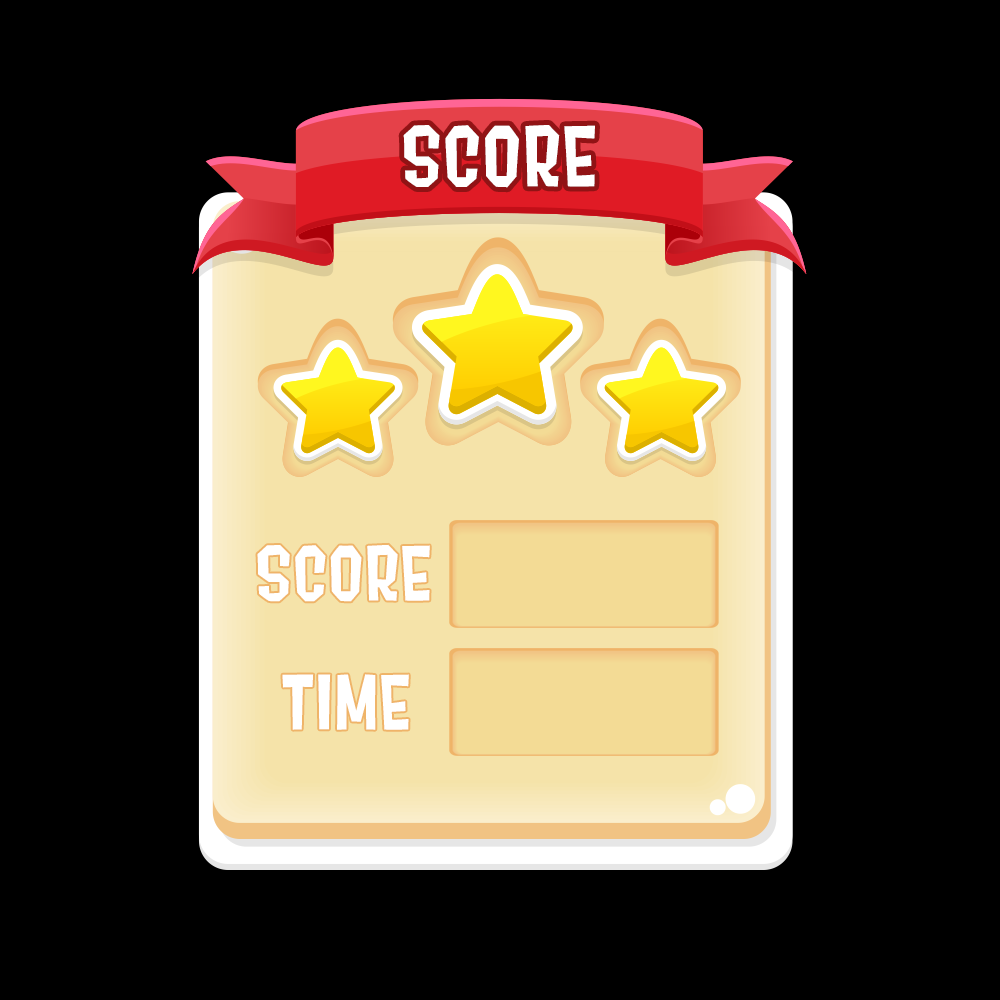
<style>
.page{position:relative;width:1000px;height:1000px;background:#000000}
.page>*{position:absolute;margin:0}
.t1{font:83.3px "Splat2K";letter-spacing:0.01em;color:#ffffff}
.t2{font:75.6px "Splat2K";letter-spacing:0.01em;color:#ffffff}
</style>
<div class="page">
<p class="t1" style="left:403px;top:125px;width:192px;height:63px">SCORE</p>
<p class="t2" style="left:257px;top:544px;width:173px;height:58px">SCORE</p>
<p class="t2" style="left:282px;top:674px;width:127px;height:56px">TIME</p>
</div>
